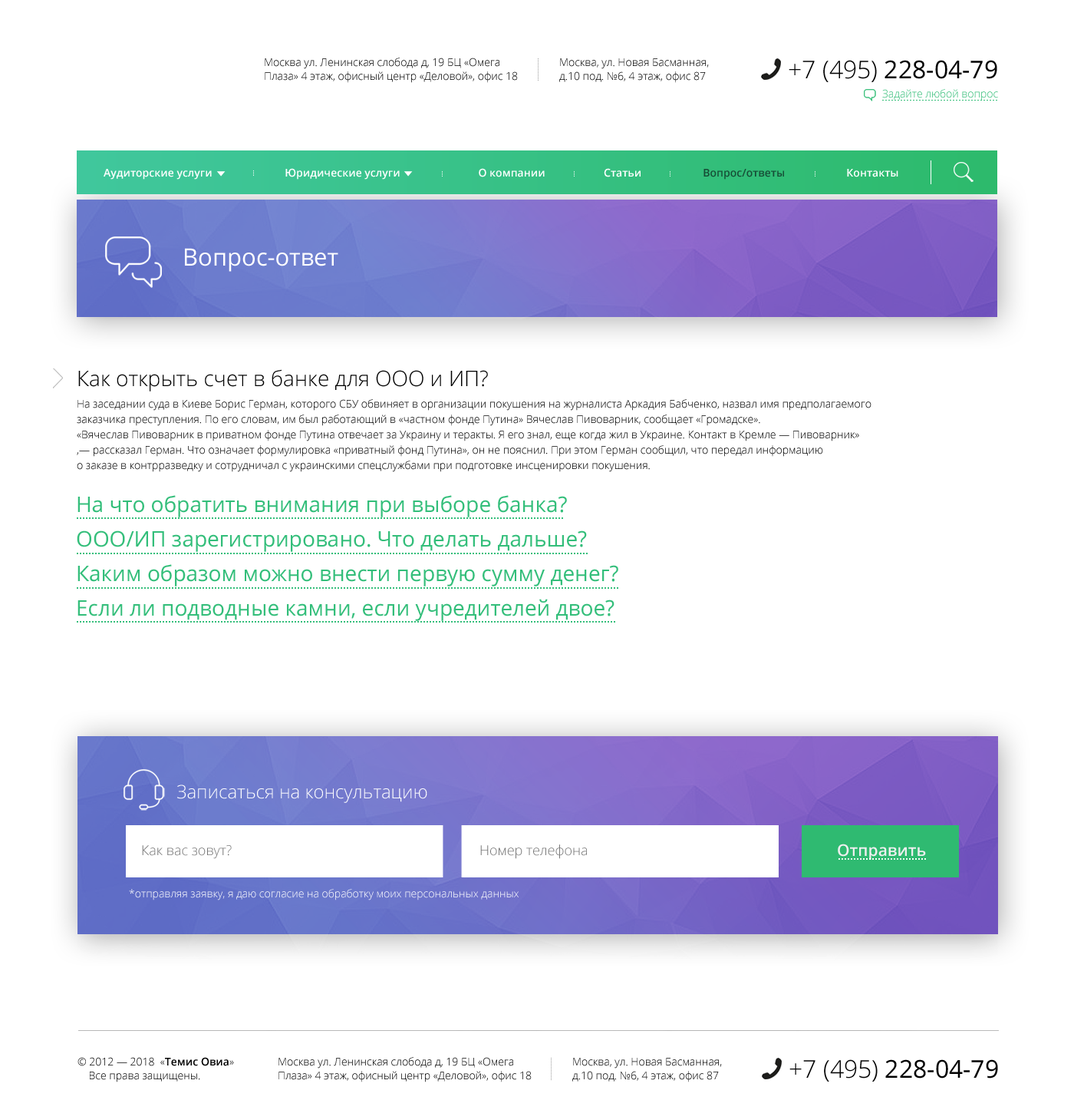
<style>
.page{position:relative;width:1074px;height:1110px;background:#ffffff}
.page>*{position:absolute;margin:0}
.t1{font:10.7px/13.8px "OpenSans-Light";color:#000000}
.t2{font:24.6px "OpenSans";color:#000000}
.t3{font:24.6px "OpenSans-Light";color:#000000}
.t4{font:10.7px "OpenSans-Light";color:#31bd76}
.t5{font:10.7px "OpenSans-Semibold";color:#ffffff}
.t6{font:10.7px "OpenSans-Semibold";color:#164d36}
.t7{font:23.8px "OpenSans";color:#ffffff}
.t8{font:21.5px "OpenSans-Light";color:#000000}
.t9{font:10.7px/15.3px "OpenSans-Light";color:#000000}
.t10{font:21.5px/34.5px "OpenSans";color:#33be7a}
.t11{font:18.4px "OpenSans-Light";color:#ffffff}
.t12{font:13.8px "OpenSans-Light";color:#767676}
.t13{font:16.1px "OpenSans-Semibold";color:#efefef}
.t14{font:10.7px "OpenSans-Light";color:#ffffff}
.t15{font:10.7px/13.8px "OpenSans-Semibold";color:#000000}
</style>
<div class="page">
<p class="t1" style="left:265px;top:58px;width:253px;height:25px">Москва ул. Ленинская слобода д, 19 БЦ «Омега <br>Плаза» 4 этаж, офисный центр «Деловой», офис 18</p>
<p class="t1" style="left:559px;top:58px;width:150px;height:25px">Москва, ул. Новая Басманная, <br>д.10 под. №6, 4 этаж, офис 87</p>
<p class="t2" style="left:789px;top:60px;width:209px;height:22px"><span class="t3">+7 (495) </span>228-04-79</p>
<p class="t4" style="left:883px;top:89px;width:115px;height:12px">Задайте любой вопрос</p>
<p class="t5" style="left:104px;top:168px;width:795px;height:12px">Аудиторские услуги                          Юридические услуги                            О компании                     Статьи                    <span class="t6">  Вопрос/ответы        </span>              Контакты</p>
<p class="t7" style="left:185px;top:248px;width:153px;height:24px">Вопрос-ответ</p>
<p class="t8" style="left:78px;top:369px;width:410px;height:22px">Как открыть счет в банке для ООО и ИП?</p>
<p class="t9" style="left:77px;top:399px;width:795px;height:73px">На заседании суда в Киеве Борис Герман, которого СБУ обвиняет в организации покушения на журналиста Аркадия Бабченко, назвал имя предполагаемого заказчика преступления. По его словам, им был работающий в «частном фонде Путина» Вячеслав Пивоварник, сообщает «Громадске».<br>«Вячеслав Пивоварник в приватном фонде Путина отвечает за Украину и теракты. Я его знал, еще когда жил в Украине. Контакт в Кремле — Пивоварник»<br>,— рассказал Герман. Что означает формулировка «приватный фонд Путина», он не пояснил. При этом Герман сообщил, что передал информацию <br>о заказе в контрразведку и сотрудничал с украинскими спецслужбами при подготовке инсценировки покушения.</p>
<p class="t10" style="left:77px;top:495px;width:542px;height:126px">На что обратить внимания при выборе банка?<br>ООО/ИП зарегистрировано. Что делать дальше?<br>Каким образом можно внести первую сумму денег?<br>Если ли подводные камни, если учредителей двое?</p>
<p class="t11" style="left:177px;top:784px;width:250px;height:19px">Записаться на консультацию</p>
<p class="t12" style="left:142px;top:845px;width:90px;height:14px">Как вас зовут?</p>
<p class="t12" style="left:480px;top:844px;width:107px;height:15px">Номер телефона</p>
<p class="t13" style="left:838px;top:843px;width:88px;height:17px">Отправить</p>
<p class="t14" style="left:129px;top:889px;width:390px;height:11px">*отправляя заявку, я даю согласие на обработку моих персональных данных</p>
<p class="t1" style="left:78px;top:1057px;width:156px;height:25px">© 2012 — 2018  «<span class="t15">Темис Овиа</span>» <br>    Все права защищены.</p>
<p class="t1" style="left:279px;top:1057px;width:253px;height:25px">Москва ул. Ленинская слобода д, 19 БЦ «Омега <br>Плаза» 4 этаж, офисный центр «Деловой», офис 18</p>
<p class="t1" style="left:573px;top:1058px;width:149px;height:24px">Москва, ул. Новая Басманная, <br>д.10 под. №6, 4 этаж, офис 87</p>
<p class="t2" style="left:790px;top:1059px;width:208px;height:22px"><span class="t3">+7 (495) </span>228-04-79</p>
</div>
